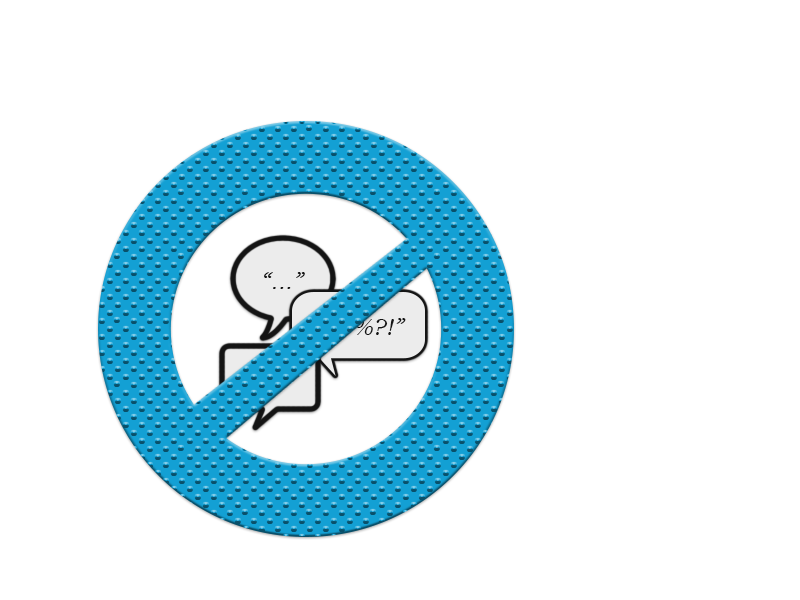
<style>
.page{position:relative;width:800px;height:600px;background:#ffffff}
.page>*{position:absolute;margin:0}
.t1{font:24px "BookmanOldStyle-Italic";color:#141414}
.t2{font:24px "BookmanOldStyle-Italic"}
</style>
<div class="page">
<p class="t1" style="left:264px;top:272px;width:41px;height:17px">“...”</p>
<p class="t2" style="left:313px;top:318px;width:93px;height:23px">“@#%?!”</p>
</div>
